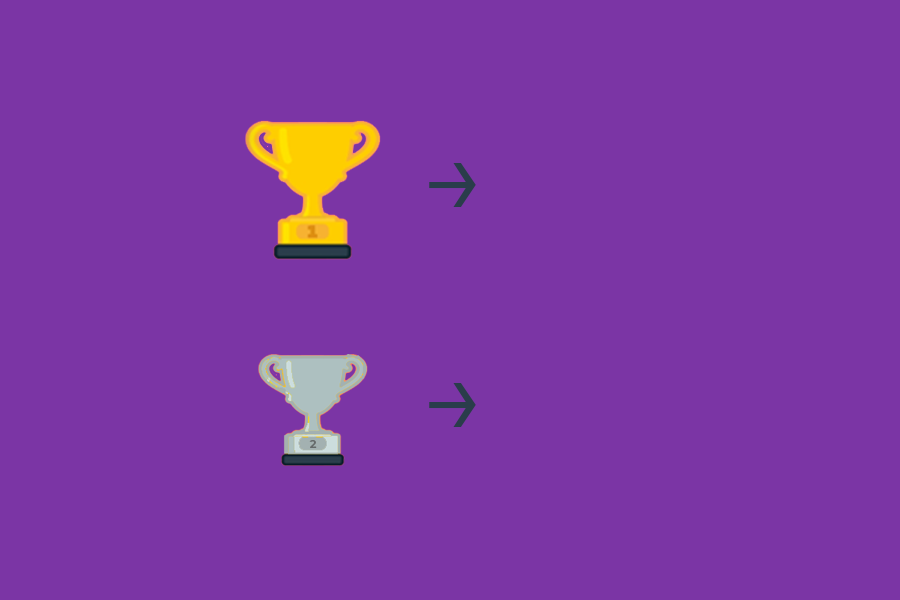
<style>
.page{position:relative;width:900px;height:600px;background:#7b35a5}
.page>*{position:absolute;margin:0}
.t1{font:110.8px "Montserrat-Regular";color:#2a3d4b}
.t2{font:11.3px "Montserrat-Bold";color:#656a6a}
</style>
<div class="page">
<p class="t1" style="left:429px;top:163px;width:47px;height:44px">→</p>
<p class="t1" style="left:429px;top:383px;width:47px;height:44px">→</p>
<p class="t2" style="left:309px;top:440px;width:8px;height:8px">2</p>
</div>
